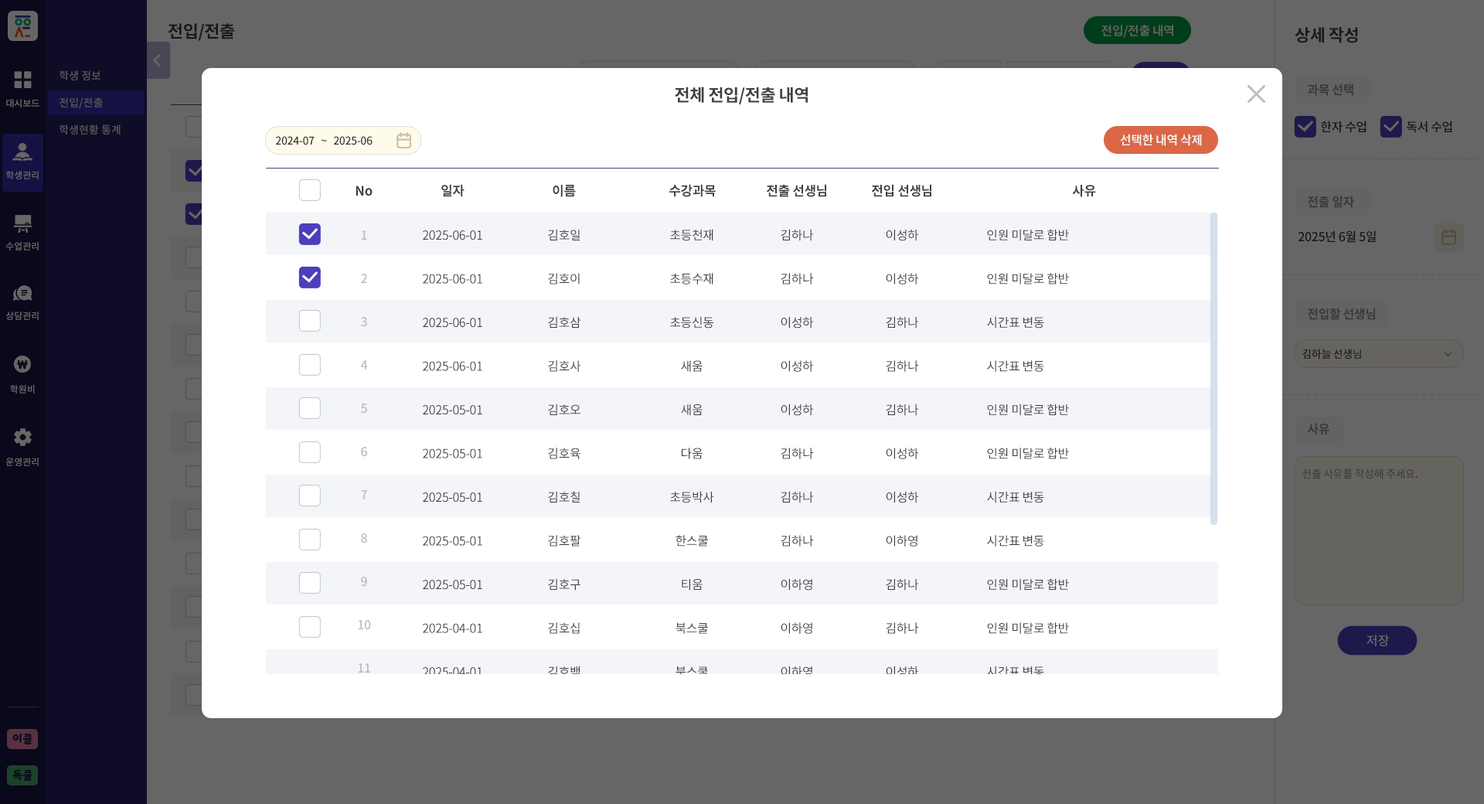
<style>
.page{position:relative;width:1484px;height:804px;background:#ffffff}
.page>*{position:absolute;margin:0}
.t1{font:17px "NotoSansCJKkr-Bold";letter-spacing:-0.025em;color:#19191b;text-transform:uppercase}
.t2{font:12.4px "NotoSansCJKkr-Medium";letter-spacing:-0.025em;color:#666666}
.t3{font:10.8px/27px "NotoSansCJKkr-Medium";color:#5a5a5a}
.t4{font:17px "NotoSansCJKkr-Bold";letter-spacing:-0.025em;color:#404040}
.t5{font:12.4px "NotoSansCJKkr-Bold";letter-spacing:-0.025em;color:#393939}
.t6{font:9.3px "NotoSansCJKkr-Medium";color:#666666}
.t7{font:12.4px "NotoSansCJKkr-Medium";letter-spacing:-0.025em;color:#141414}
.t8{font:10.8px "NotoSansCJKkr-Medium";letter-spacing:-0.025em;color:#323232}
.t9{font:12.4px "NotoSansCJKkr-Medium";letter-spacing:-0.025em;color:#ffffff}
.t10{font:13.1px "NotoSansCJKkr-Bold";letter-spacing:-0.025em;color:#404040}
.t11{font:12.4px/43.3px "NotoSansCJKkr-Medium";letter-spacing:-0.025em;color:#a8a8a8}
.t12{font:12.4px/43.7px "NotoSansCJKkr-Regular";letter-spacing:-0.025em;color:#404040}
.t13{font:10.8px "NotoSansCJKkr-Medium";letter-spacing:-0.025em;color:#141414}
.t14{font:12.7px "NotoSansCJKkr-Medium";letter-spacing:-0.005em;color:#666666}
.t15{font:10.8px "YoonSoftSlime";color:#0a081b}
</style>
<div class="page">
<p class="t1" style="left:168px;top:23px;width:67px;height:18px">전입/전출</p>
<p class="t2" style="left:1101px;top:25px;width:72px;height:13px">전입/전출 내역</p>
<p class="t1" style="left:1294px;top:27px;width:64px;height:16px">상세 작성</p>
<p class="t3" style="left:60px;top:70px;width:61px;height:64px">학생 정보<br>전입/전출<br>학생현황 통계</p>
<p class="t4" style="left:675px;top:87px;width:133px;height:17px">전체 전입/전출 내역</p>
<p class="t5" style="left:1307px;top:83px;width:46px;height:13px">과목 선택</p>
<p class="t6" style="left:6px;top:99px;width:33px;height:8px">대시보드</p>
<p class="t7" style="left:1321px;top:121px;width:45px;height:12px">한자 수업</p>
<p class="t7" style="left:1406px;top:121px;width:46px;height:12px">독서 수업</p>
<p class="t8" style="left:275px;top:136px;width:97px;height:9px">2024-07   ~   2025-06</p>
<p class="t9" style="left:1120px;top:134px;width:82px;height:12px">선택한 내역 삭제</p>
<p class="t6" style="left:6px;top:171px;width:33px;height:8px">학생관리</p>
<p class="t10" style="left:355px;top:185px;width:17px;height:11px">No</p>
<p class="t10" style="left:441px;top:184px;width:23px;height:13px">일자</p>
<p class="t10" style="left:553px;top:185px;width:23px;height:12px">이름</p>
<p class="t10" style="left:669px;top:184px;width:47px;height:13px">수강과목</p>
<p class="t10" style="left:766px;top:184px;width:60px;height:13px">전출 선생님</p>
<p class="t10" style="left:871px;top:184px;width:60px;height:13px">전입 선생님</p>
<p class="t10" style="left:1072px;top:185px;width:24px;height:12px">사유</p>
<p class="t5" style="left:1308px;top:196px;width:46px;height:12px">전출 일자</p>
<p class="t11" style="left:358px;top:230px;width:13px;height:442px;text-align:center;opacity:0.8">1<br>2<br>3<br>4<br>5<br>6<br>7<br>8<br>9<br>10<br>11</p>
<p class="t12" style="left:423px;top:230px;width:59px;height:447px">2025-06-01<br>2025-06-01<br>2025-06-01<br>2025-06-01<br>2025-05-01<br>2025-05-01<br>2025-05-01<br>2025-05-01<br>2025-05-01<br>2025-04-01<br>2025-04-01</p>
<p class="t12" style="left:548px;top:229px;width:33px;height:448px">김호일<br>김호이<br>김호삼<br>김호사<br>김호오<br>김호육<br>김호칠<br>김호팔<br>김호구<br>김호십<br>김호백</p>
<p class="t12" style="left:670px;top:229px;width:44px;height:449px;text-align:center">초등천재<br>초등수재<br>초등신동<br>새움<br>새움<br>다움<br>초등박사<br>한스쿨<br>티움<br>북스쿨<br>북스쿨</p>
<p class="t12" style="left:780px;top:229px;width:33px;height:449px;text-align:center">김하나<br>김하나<br>이성하<br>이성하<br>이성하<br>김하나<br>김하나<br>김하나<br>이하영<br>이하영<br>이하영</p>
<p class="t12" style="left:886px;top:230px;width:32px;height:448px;text-align:center">이성하<br>이성하<br>김하나<br>김하나<br>김하나<br>이성하<br>이성하<br>이하영<br>김하나<br>김하나<br>이성하</p>
<p class="t12" style="left:987px;top:229px;width:82px;height:449px">인원 미달로 합반<br>인원 미달로 합반<br>시간표 변동<br>시간표 변동<br>인원 미달로 합반<br>인원 미달로 합반<br>시간표 변동<br>시간표 변동<br>인원 미달로 합반<br>인원 미달로 합반<br>시간표 변동</p>
<p class="t7" style="left:1298px;top:230px;width:78px;height:13px">2025년 6월 5일</p>
<p class="t6" style="left:5px;top:242px;width:34px;height:8px">수업관리</p>
<p class="t6" style="left:5px;top:311px;width:34px;height:9px">상담관리</p>
<p class="t5" style="left:1308px;top:308px;width:67px;height:12px">전입할 선생님</p>
<p class="t13" style="left:1302px;top:349px;width:59px;height:10px">김하늘 선생님</p>
<p class="t6" style="left:10px;top:385px;width:25px;height:8px">학원비</p>
<p class="t5" style="left:1307px;top:423px;width:22px;height:12px">사유</p>
<p class="t6" style="left:5px;top:457px;width:34px;height:9px">운영관리</p>
<p class="t8" style="left:1302px;top:468px;width:115px;height:11px;opacity:0.59">전출 사유를 작성해 주세요.</p>
<p class="t14" style="left:1366px;top:634px;width:23px;height:12px">저장</p>
<p class="t15" style="left:12px;top:733px;width:20px;height:11px">이클</p>
<p class="t15" style="left:12px;top:770px;width:20px;height:10px">독클</p>
</div>
